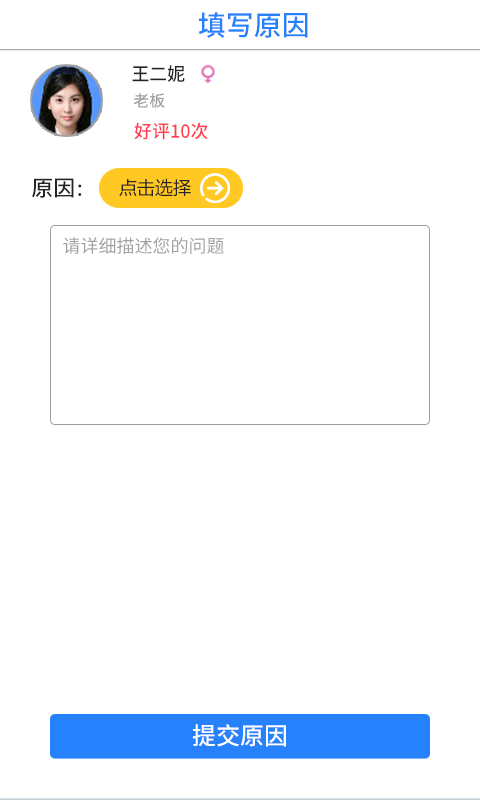
<style>
.page{position:relative;width:480px;height:800px;background:#ffffff}
.page>*{position:absolute;margin:0}
.t1{font:28px "NotoSansHans-Medium";color:#2681fc}
.t2{font:18.3px "NotoSansHans-Medium";color:#252323}
.t3{font:16px "NotoSansHans-Medium";color:#a0a0a0}
.t4{font:18px "NotoSansHans-Medium";color:#ff3e50}
.t5{font:22px "NotoSansHans-Medium";color:#252323}
.t6{font:18px "NotoSansHans-Medium";color:#252323}
.t7{font:18px "NotoSansHans-Regular";color:#a0a0a0}
.t8{font:24px "NotoSansHans-Medium";color:#ffffff}
</style>
<div class="page">
<p class="t1" style="left:198px;top:12px;width:110px;height:26px">填写原因</p>
<p class="t2" style="left:132px;top:65px;width:53px;height:17px">王二妮</p>
<p class="t3" style="left:133px;top:93px;width:32px;height:15px">老板</p>
<p class="t4" style="left:134px;top:122px;width:74px;height:18px">好评10次</p>
<p class="t5" style="left:32px;top:178px;width:50px;height:20px">原因<span class="t6">：</span></p>
<p class="t7" style="left:63px;top:237px;width:161px;height:17px">请详细描述您的问题</p>
<p class="t8" style="left:192px;top:724px;width:94px;height:23px">提交原因</p>
</div>
